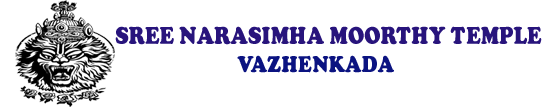
<style>
.page{position:relative;width:560px;height:107px;background:#ffffff}
.page>*{position:absolute;margin:0}
.t1{font:25px/97px "CooperBlack";letter-spacing:0.02em;color:#28147c;scale:0.83 1}
.t2{font:22.6px/97px "Modern-Regular";letter-spacing:0.02em;color:#ff4343;scale:0.83 1}
</style>
<div class="page">
<p class="t1" style="left:115px;top:26px;width:427px;height:19px;text-align:center">SREE NARASIMHA MOORTHY TEMPLE<br><span class="t2">DDDD</span></p>
</div>
